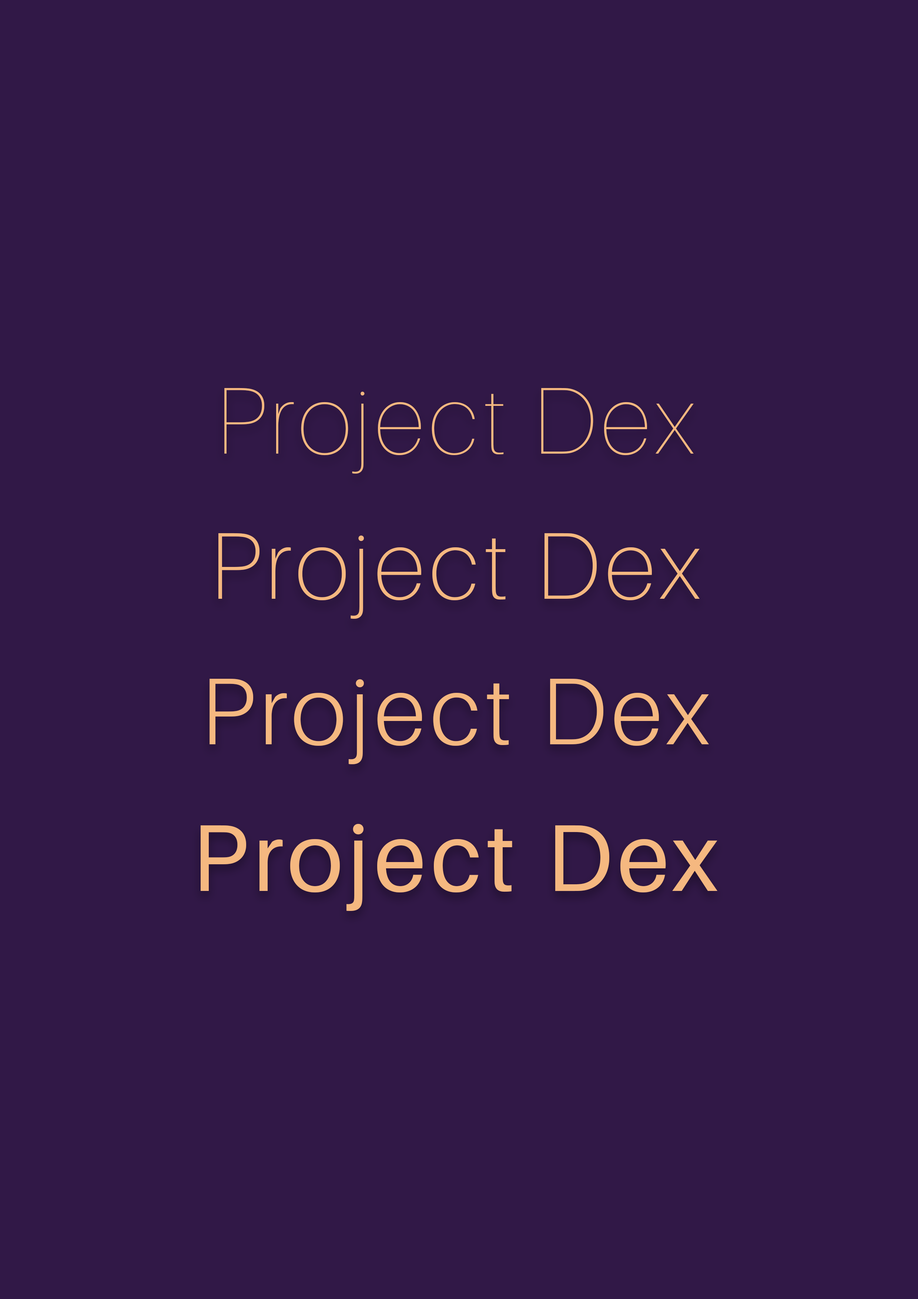
<style>
.page{position:relative;width:918px;height:1299px;background:#311847}
.page>*{position:absolute;margin:0}
.t1{font:94.8px "Aileron-UltraLight";letter-spacing:0.05em;color:#f5b880}
.t2{font:94.8px "Aileron-Thin";letter-spacing:0.05em;color:#f5b880}
.t3{font:94.8px "Aileron-Light";letter-spacing:0.05em;color:#f5b880}
.t4{font:94.8px "Aileron-Regular";letter-spacing:0.05em;color:#f5b880}
</style>
<div class="page">
<p class="t1" style="left:224px;top:388px;width:470px;height:86px">Project Dex</p>
<p class="t2" style="left:218px;top:533px;width:482px;height:86px">Project Dex</p>
<p class="t3" style="left:210px;top:679px;width:499px;height:85px">Project Dex</p>
<p class="t4" style="left:201px;top:823px;width:516px;height:88px">Project Dex</p>
</div>
